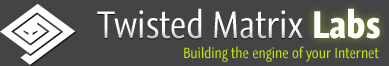
<style>
.page{position:relative;width:389px;height:66px;background:#444444}
.page>*{position:absolute;margin:0}
.t1{font:36px "GraublauWeb-Regular";color:#ffffff}
.t2{font:36px "GraublauWeb-Bold";color:#ffffff}
.t3{font:14px "GraublauWeb-Regular";color:#bce715}
</style>
<div class="page">
<p class="t1" style="left:97px;top:8px;width:206px;height:31px">Twisted Matrix</p>
<p class="t2" style="left:314px;top:8px;width:66px;height:31px">Labs</p>
<p class="t3" style="left:184px;top:46px;width:195px;height:16px">Building the engine of your Internet</p>
</div>
